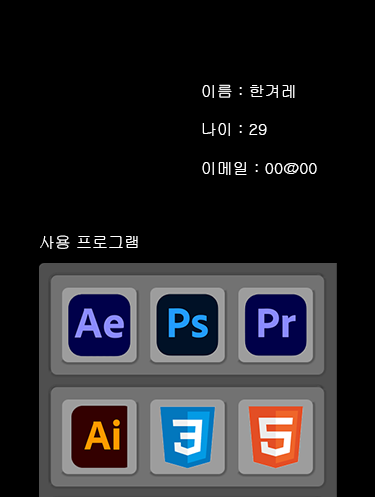
<style>
.page{position:relative;width:375px;height:497px;background:#000000}
.page>*{position:absolute;margin:0}
.t1{font:16px "Gulim";color:#ffffff}
</style>
<div class="page">
<p class="t1" style="left:202px;top:84px;width:115px;height:91px">이름 : 한겨레<br><br>나이 : 29<br><br>이메일 : 00@00</p>
<p class="t1" style="left:40px;top:235px;width:98px;height:14px">사용 프로그램</p>
</div>
